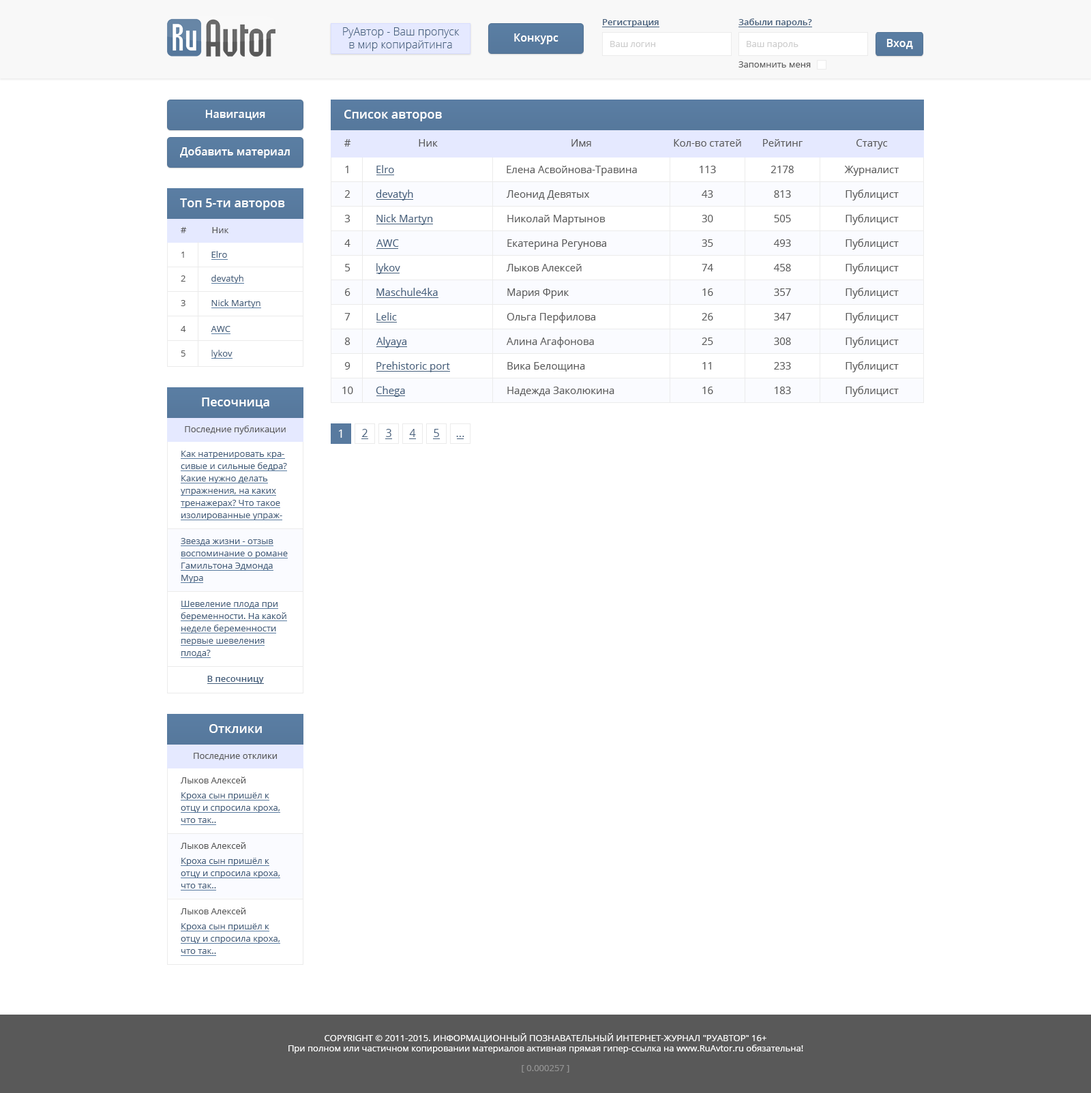
<style>
.page{position:relative;width:1091px;height:1093px;background:#ffffff}
.page>*{position:absolute;margin:0}
.t1{font:10.9px "OpenSans-Light";color:#455f7c}
.t2{font:8.9px "OpenSans-Semibold";color:#455f7c}
.t3{font:10.9px "OpenSans-Semibold";color:#ffffff}
.t4{font:8.9px "OpenSans";color:#cccccc}
.t5{font:8.9px "OpenSans";color:#595959}
.t6{font:12.3px "OpenSans-Semibold";color:#ffffff}
.t7{font:10.2px "OpenSans";color:#595959}
.t8{font:10.2px "OpenSans";color:#455f7c}
.t9{font:8.9px "OpenSans";color:#455f7c}
.t10{font:10.9px "OpenSans";color:#ffffff}
.t11{font:10.9px "OpenSans";color:#455f7c}
.t12{font:8.9px/12.3px "OpenSans";color:#455f7c}
.t13{font:8.9px "OpenSans";color:#ffffff}
.t14{font:8.9px "OpenSans";color:#929292}
</style>
<div class="page">
<p class="t1" style="left:343px;top:27px;width:117px;height:24px;text-align:center">РуАвтор - Ваш пропуск<br>в мир копирайтинга</p>
<p class="t2" style="left:603px;top:19px;width:56px;height:8px">Регистрация</p>
<p class="t2" style="left:738px;top:18px;width:74px;height:9px">Забыли пароль?</p>
<p class="t3" style="left:514px;top:33px;width:44px;height:11px">Конкурс</p>
<p class="t4" style="left:610px;top:41px;width:45px;height:6px">Ваш логин</p>
<p class="t4" style="left:747px;top:41px;width:51px;height:8px">Ваш пароль</p>
<p class="t3" style="left:886px;top:39px;width:27px;height:10px">Вход</p>
<p class="t5" style="left:738px;top:61px;width:73px;height:7px">Запомнить меня</p>
<p class="t3" style="left:205px;top:110px;width:60px;height:10px">Навигация</p>
<p class="t6" style="left:344px;top:110px;width:98px;height:11px">Список авторов</p>
<p class="t3" style="left:180px;top:147px;width:110px;height:11px">Добавить материал</p>
<p class="t7" style="left:344px;top:139px;width:7px;height:8px">#</p>
<p class="t7" style="left:419px;top:139px;width:19px;height:8px">Ник</p>
<p class="t7" style="left:571px;top:139px;width:20px;height:8px">Имя</p>
<p class="t7" style="left:674px;top:139px;width:67px;height:8px">Кол-во статей</p>
<p class="t7" style="left:763px;top:139px;width:40px;height:8px">Рейтинг</p>
<p class="t7" style="left:856px;top:139px;width:32px;height:10px">Статус</p>
<p class="t7" style="left:345px;top:166px;width:3px;height:7px">1</p>
<p class="t8" style="left:376px;top:165px;width:18px;height:8px">Elro</p>
<p class="t7" style="left:507px;top:166px;width:130px;height:10px">Елена Асвойнова-Травина</p>
<p class="t7" style="left:700px;top:166px;width:16px;height:7px">113</p>
<p class="t7" style="left:770px;top:166px;width:24px;height:7px">2178</p>
<p class="t7" style="left:844px;top:166px;width:55px;height:10px">Журналист</p>
<p class="t7" style="left:344px;top:190px;width:6px;height:8px">2</p>
<p class="t8" style="left:376px;top:190px;width:37px;height:10px">devatyh</p>
<p class="t7" style="left:506px;top:190px;width:84px;height:10px">Леонид Девятых</p>
<p class="t7" style="left:702px;top:190px;width:11px;height:8px">43</p>
<p class="t7" style="left:774px;top:190px;width:17px;height:8px">813</p>
<p class="t7" style="left:845px;top:190px;width:54px;height:10px">Публицист</p>
<p class="t6" style="left:180px;top:198px;width:105px;height:12px">Топ 5-ти авторов</p>
<p class="t7" style="left:344px;top:215px;width:6px;height:7px">3</p>
<p class="t8" style="left:376px;top:214px;width:57px;height:11px">Nick Martyn</p>
<p class="t7" style="left:507px;top:215px;width:98px;height:10px">Николай Мартынов</p>
<p class="t7" style="left:702px;top:215px;width:11px;height:7px">30</p>
<p class="t7" style="left:774px;top:215px;width:17px;height:7px">505</p>
<p class="t7" style="left:845px;top:214px;width:54px;height:11px">Публицист</p>
<p class="t5" style="left:181px;top:227px;width:48px;height:6px">#           Ник</p>
<p class="t7" style="left:344px;top:239px;width:6px;height:8px">4</p>
<p class="t8" style="left:376px;top:239px;width:23px;height:8px">AWC</p>
<p class="t7" style="left:507px;top:239px;width:99px;height:11px">Екатерина Регунова</p>
<p class="t7" style="left:702px;top:239px;width:11px;height:8px">35</p>
<p class="t7" style="left:773px;top:239px;width:18px;height:8px">493</p>
<p class="t7" style="left:845px;top:239px;width:54px;height:11px">Публицист</p>
<p class="t9" style="left:181px;top:251px;width:46px;height:7px"><span class="t5">1           </span>Elro</p>
<p class="t7" style="left:345px;top:264px;width:5px;height:7px">5</p>
<p class="t8" style="left:376px;top:263px;width:24px;height:11px">lykov</p>
<p class="t7" style="left:506px;top:264px;width:76px;height:7px">Лыков Алексей</p>
<p class="t7" style="left:702px;top:264px;width:11px;height:7px">74</p>
<p class="t7" style="left:773px;top:264px;width:18px;height:7px">458</p>
<p class="t7" style="left:845px;top:263px;width:54px;height:11px">Публицист</p>
<p class="t9" style="left:181px;top:275px;width:62px;height:9px"><span class="t5">2           </span>devatyh</p>
<p class="t7" style="left:345px;top:288px;width:5px;height:8px">6</p>
<p class="t8" style="left:376px;top:288px;width:62px;height:8px">Maschule4ka</p>
<p class="t7" style="left:507px;top:288px;width:62px;height:11px">Мария Фрик</p>
<p class="t7" style="left:702px;top:288px;width:11px;height:8px">16</p>
<p class="t7" style="left:774px;top:288px;width:17px;height:8px">357</p>
<p class="t7" style="left:845px;top:288px;width:54px;height:11px">Публицист</p>
<p class="t9" style="left:181px;top:299px;width:79px;height:9px"><span class="t5">3           </span>Nick Martyn</p>
<p class="t7" style="left:344px;top:313px;width:6px;height:7px">7</p>
<p class="t8" style="left:376px;top:312px;width:21px;height:8px">Lelic</p>
<p class="t7" style="left:507px;top:312px;width:88px;height:11px">Ольга Перфилова</p>
<p class="t7" style="left:702px;top:313px;width:11px;height:7px">26</p>
<p class="t7" style="left:774px;top:313px;width:17px;height:7px">347</p>
<p class="t7" style="left:845px;top:312px;width:54px;height:11px">Публицист</p>
<p class="t9" style="left:181px;top:326px;width:49px;height:6px"><span class="t5">4           </span>AWC</p>
<p class="t7" style="left:344px;top:338px;width:6px;height:7px">8</p>
<p class="t8" style="left:376px;top:337px;width:30px;height:11px">Alyaya</p>
<p class="t7" style="left:507px;top:337px;width:87px;height:11px">Алина Агафонова</p>
<p class="t7" style="left:702px;top:338px;width:11px;height:7px">25</p>
<p class="t7" style="left:774px;top:338px;width:17px;height:7px">308</p>
<p class="t7" style="left:845px;top:337px;width:54px;height:11px">Публицист</p>
<p class="t9" style="left:181px;top:350px;width:52px;height:9px"><span class="t5">5           </span>lykov</p>
<p class="t7" style="left:344px;top:362px;width:6px;height:8px">9</p>
<p class="t8" style="left:376px;top:361px;width:74px;height:11px">Prehistoric port</p>
<p class="t7" style="left:507px;top:362px;width:78px;height:10px">Вика Белощина</p>
<p class="t7" style="left:702px;top:362px;width:9px;height:8px">11</p>
<p class="t7" style="left:774px;top:362px;width:17px;height:8px">233</p>
<p class="t7" style="left:845px;top:361px;width:54px;height:11px">Публицист</p>
<p class="t7" style="left:342px;top:387px;width:11px;height:7px">10</p>
<p class="t8" style="left:376px;top:386px;width:29px;height:11px">Chega</p>
<p class="t7" style="left:507px;top:387px;width:107px;height:9px">Надежда Заколюкина</p>
<p class="t7" style="left:702px;top:387px;width:11px;height:7px">16</p>
<p class="t7" style="left:775px;top:387px;width:16px;height:7px">183</p>
<p class="t7" style="left:845px;top:386px;width:54px;height:11px">Публицист</p>
<p class="t6" style="left:202px;top:398px;width:67px;height:10px">Песочница</p>
<p class="t5" style="left:185px;top:425px;width:101px;height:9px">Последние публикации</p>
<p class="t10" style="left:339px;top:430px;width:3px;height:8px">1</p>
<p class="t11" style="left:362px;top:429px;width:6px;height:8px">2</p>
<p class="t11" style="left:386px;top:429px;width:5px;height:8px">3</p>
<p class="t11" style="left:409px;top:429px;width:7px;height:8px">4</p>
<p class="t11" style="left:434px;top:429px;width:5px;height:8px">5</p>
<p class="t11" style="left:456px;top:436px;width:8px;height:1px">...</p>
<p class="t12" style="left:181px;top:451px;width:106px;height:69px">Как натренировать красивые и сильные бедра? Какие нужно делать упражнения, на каких тренажерах? Что такое изолированные упражнения и для чего они нужны?</p>
<p class="t12" style="left:181px;top:538px;width:107px;height:45px">Звезда жизни - отзыв воспоминание о романе Гамильтона Эдмонда Мура</p>
<p class="t12" style="left:181px;top:601px;width:105px;height:56px">Шевеление плода при беременности. На какой неделе беременности первые шевеления плода?</p>
<p class="t2" style="left:207px;top:676px;width:57px;height:8px">В песочницу</p>
<p class="t6" style="left:209px;top:724px;width:53px;height:9px">Отклики</p>
<p class="t5" style="left:194px;top:753px;width:83px;height:7px">Последние отклики</p>
<p class="t5" style="left:180px;top:777px;width:65px;height:6px">Лыков Алексей</p>
<p class="t12" style="left:181px;top:792px;width:99px;height:31px">Кроха сын пришёл к отцу и спросила кроха, что так..</p>
<p class="t5" style="left:180px;top:842px;width:65px;height:7px">Лыков Алексей</p>
<p class="t12" style="left:181px;top:858px;width:99px;height:30px">Кроха сын пришёл к отцу и спросила кроха, что так..</p>
<p class="t5" style="left:180px;top:908px;width:65px;height:6px">Лыков Алексей</p>
<p class="t12" style="left:181px;top:923px;width:99px;height:31px">Кроха сын пришёл к отцу и спросила кроха, что так..</p>
<p class="t13" style="left:288px;top:1033px;width:515px;height:20px;text-align:center">COPYRIGHT © 2011-2015. ИНФОРМАЦИОННЫЙ ПОЗНАВАТЕЛЬНЫЙ ИНТЕРНЕТ-ЖУРНАЛ "РУАВТОР" 16+<br>При полном или частичном копировании материалов активная прямая гипер-ссылка на www.RuAvtor.ru обязательна!</p>
<p class="t14" style="left:522px;top:1065px;width:47px;height:8px">[ 0.000257 ]</p>
</div>
